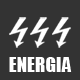
<style>
.page{position:relative;width:80px;height:80px;background:#333333}
.page>*{position:absolute;margin:0}
.t1{font:19.2px "Impact";color:#ffffff}
</style>
<div class="page">
<p class="t1" style="left:9px;top:57px;width:63px;height:15px">ENERGIA</p>
</div>
